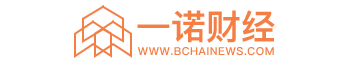
<style>
.page{position:relative;width:350px;height:65px;background:#ffffff}
.page>*{position:absolute;margin:0}
.t1{font:34.7px "PingFang-SC-Heavy";color:#f47e44}
.t2{font:11px "PingFang-SC-Heavy";letter-spacing:0.05em;color:#f47e44;text-transform:uppercase}
</style>
<div class="page">
<p class="t1" style="left:137px;top:10px;width:138px;height:33px">一诺财经</p>
<p class="t2" style="left:137px;top:47px;width:137px;height:9px">www.bchainews.com</p>
</div>
